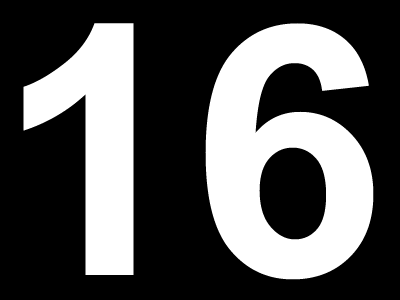
<style>
.page{position:relative;width:400px;height:300px;background:#000000}
.page>*{position:absolute;margin:0}
.t1{font:350px "Arial-BoldMT";color:#ffffff}
</style>
<div class="page">
<p class="t1" style="left:23px;top:23px;width:351px;height:257px">16</p>
</div>
